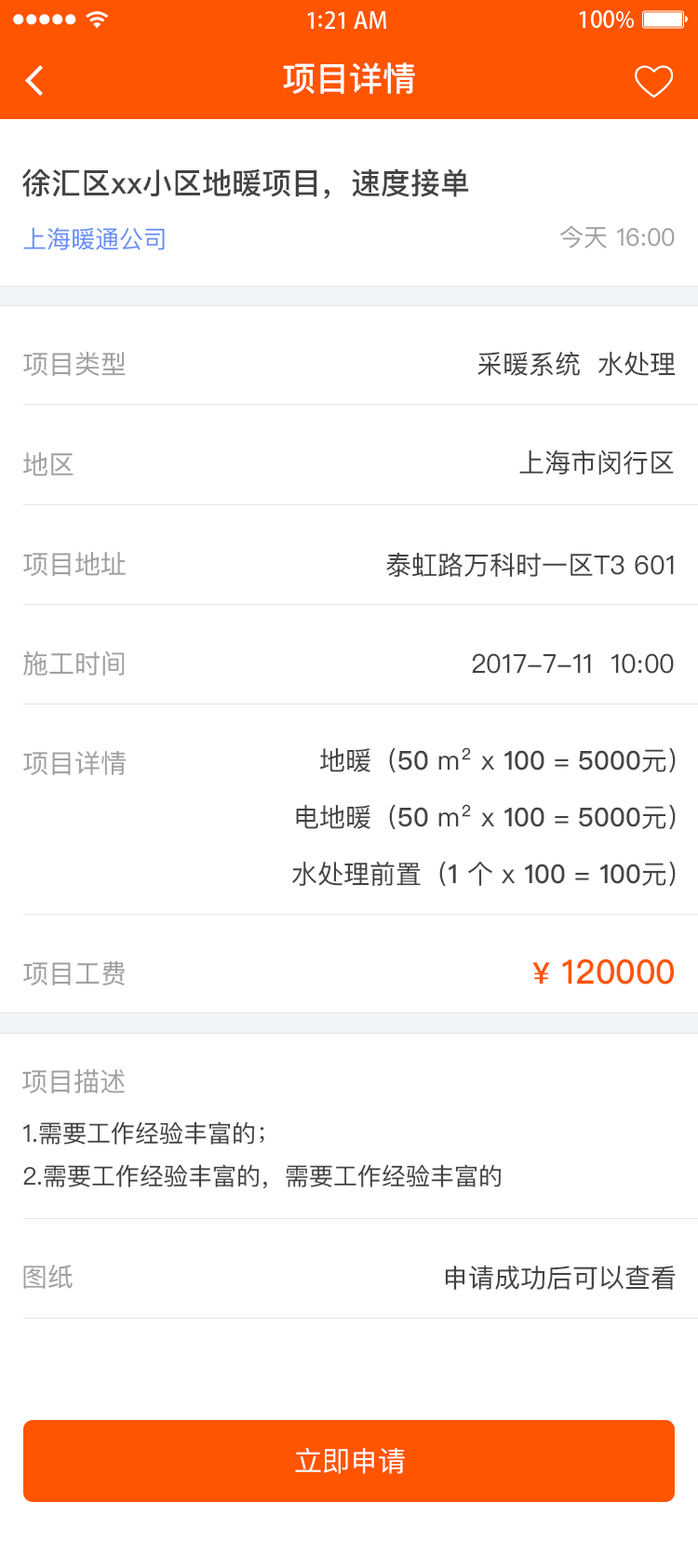
<style>
.page{position:relative;width:698px;height:1568px;background:#ffffff}
.page>*{position:absolute;margin:0}
.t1{font:33.5px "PingFangSC-Medium";color:#ffffff}
.t2{font:29.8px "PingFangSC-Medium";color:#434343}
.t3{font:24.2px "PingFangSC-Regular";color:#648df6}
.t4{font:24.2px "PingFangSC-Regular";color:#a0a0a0}
.t5{font:26.1px "PingFangSC-Regular";color:#a0a0a0}
.t6{font:26.1px "PingFangSC-Regular";color:#434343}
.t7{font:26.1px/60.5px "PingFangSC-Regular";color:#434343}
.t8{font:26.1px/60.5px "PingFangSC-Medium";color:#434343}
.t9{font:33.5px "PingFangSC-Medium";color:#ff5400}
.t10{font:29.8px "PingFangSC-Medium";color:#ff5400}
.t11{font:24.2px/46.5px "PingFangSC-Regular";color:#434343}
.t12{font:27.9px "PingFangSC-Regular";color:#ffffff;text-transform:uppercase}
</style>
<div class="page">
<p class="t1" style="left:283px;top:62px;width:132px;height:32px">项目详情</p>
<p class="t2" style="left:22px;top:168px;width:447px;height:31px">徐汇区xx小区地暖项目，速度接单</p>
<p class="t3" style="left:23px;top:227px;width:142px;height:23px">上海暖通公司</p>
<p class="t4" style="left:560px;top:225px;width:115px;height:23px">今天 16:00</p>
<p class="t5" style="left:23px;top:352px;width:103px;height:24px">项目类型</p>
<p class="t6" style="left:477px;top:351px;width:198px;height:25px">采暖系统  水处理</p>
<p class="t6" style="left:519px;top:449px;width:155px;height:26px">上海市闵行区</p>
<p class="t5" style="left:23px;top:452px;width:51px;height:24px">地区</p>
<p class="t5" style="left:23px;top:552px;width:103px;height:24px">项目地址</p>
<p class="t6" style="left:386px;top:552px;width:288px;height:25px">泰虹路万科时一区T3 601</p>
<p class="t5" style="left:23px;top:650px;width:102px;height:26px">施工时间</p>
<p class="t6" style="left:472px;top:653px;width:202px;height:21px">2017-7-11  10:00</p>
<p class="t7" style="left:292px;top:747px;width:384px;height:140px;text-align:right">地暖（<span class="t8">50 </span>m² x <span class="t8">100 </span>= <span class="t8">5000</span>元）<br>电地暖（<span class="t8">50 </span>m² x <span class="t8">100 </span>= <span class="t8">5000</span>元）<br>水处理前置（<span class="t8">1 </span>个 x <span class="t8">100 </span>= <span class="t8">100</span>元）</p>
<p class="t5" style="left:23px;top:751px;width:103px;height:24px">项目详情</p>
<p class="t5" style="left:23px;top:961px;width:102px;height:24px">项目工费</p>
<p class="t9" style="left:532px;top:958px;width:142px;height:27px"><span class="t10">¥</span> 120000</p>
<p class="t5" style="left:22px;top:1069px;width:103px;height:24px">项目描述</p>
<p class="t11" style="left:23px;top:1121px;width:479px;height:68px">1.需要工作经验丰富的；<br>2.需要工作经验丰富的，需要工作经验丰富的</p>
<p class="t5" style="left:23px;top:1265px;width:50px;height:24px">图纸</p>
<p class="t6" style="left:445px;top:1266px;width:231px;height:24px">申请成功后可以查看</p>
<p class="t12" style="left:295px;top:1448px;width:110px;height:26px">立即申请</p>
</div>
